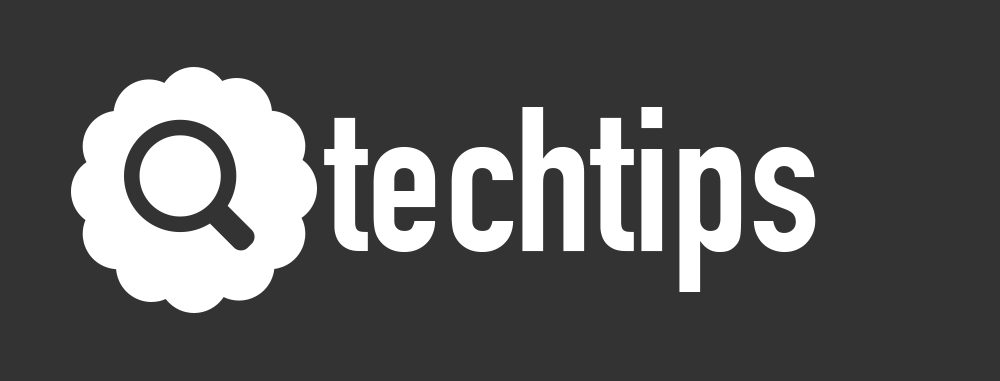
<style>
.page{position:relative;width:1000px;height:381px;background:#333333}
.page>*{position:absolute;margin:0}
.t1{font:201.7px "DINCondensed-Bold";color:#ffffff}
</style>
<div class="page">
<p class="t1" style="left:324px;top:107px;width:492px;height:185px">techtips</p>
</div>
